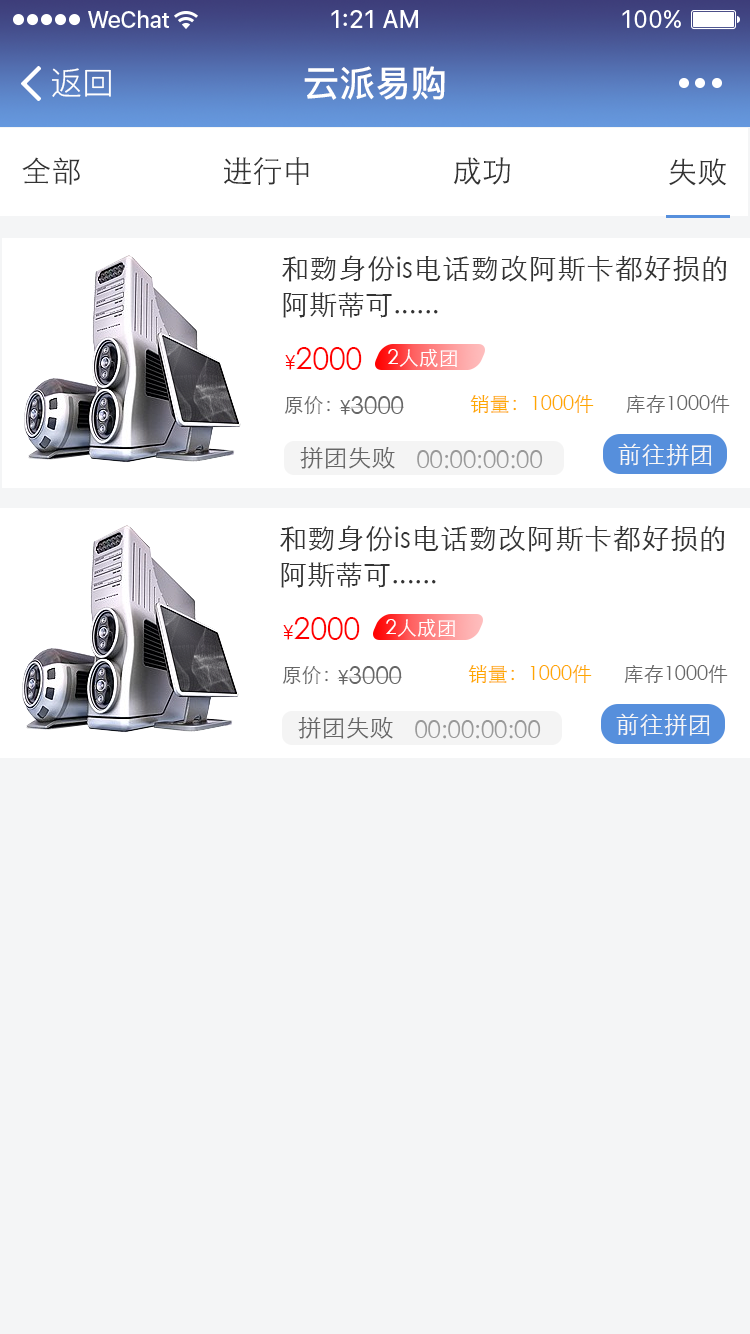
<style>
.page{position:relative;width:750px;height:1334px;background:#f4f5f6}
.page>*{position:absolute;margin:0}
.t1{font:32px "PingFang-SC-Regular";color:#ffffff}
.t2{font:36px "PingFang-SC-Bold";color:#ffffff}
.t3{font:30px "STXihei";color:#333333}
.t4{font:28px/36px "STXihei";color:#333333}
.t5{font:30px "STXihei";color:#ff0000}
.t6{font:20px "STXihei";color:#ff0000}
.t7{font:20px "STXihei";color:#ffffff}
.t8{font:20px "STXihei";color:#666666}
.t9{font:24px "STXihei";color:#666666}
.t10{font:20px "STXihei";color:#ffa800}
.t11{font:24px "STXihei";color:#f7f7f7}
.t12{font:24px "STXihei";color:#999999}
</style>
<div class="page">
<p class="t1" style="left:52px;top:68px;width:59px;height:29px">返回</p>
<p class="t2" style="left:304px;top:66px;width:141px;height:34px">云派易购</p>
<p class="t3" style="left:22px;top:157px;width:58px;height:28px">全部</p>
<p class="t3" style="left:224px;top:157px;width:85px;height:28px">进行中</p>
<p class="t3" style="left:453px;top:157px;width:57px;height:28px">成功</p>
<p class="t3" style="left:669px;top:158px;width:58px;height:28px">失败</p>
<p class="t4" style="left:282px;top:255px;width:445px;height:63px;text-align:justify">和覅身份is电话覅改阿斯卡都好损的阿斯蒂可......</p>
<p class="t5" style="left:285px;top:347px;width:77px;height:23px"><span class="t6">¥</span>2000</p>
<p class="t7" style="left:388px;top:349px;width:69px;height:18px">2人成团</p>
<p class="t8" style="left:284px;top:396px;width:46px;height:19px">原价：</p>
<p class="t9" style="left:339px;top:396px;width:65px;height:19px"><span class="t8">¥</span>3000</p>
<p class="t10" style="left:470px;top:394px;width:124px;height:19px">销量：1000件</p>
<p class="t8" style="left:626px;top:394px;width:104px;height:19px">库存1000件</p>
<p class="t9" style="left:300px;top:447px;width:95px;height:22px">拼团失败</p>
<p class="t11" style="left:618px;top:443px;width:94px;height:23px">前往拼团</p>
<p class="t12" style="left:417px;top:450px;width:126px;height:19px">00:00:00:00</p>
<p class="t4" style="left:280px;top:525px;width:445px;height:63px;text-align:justify">和覅身份is电话覅改阿斯卡都好损的阿斯蒂可......</p>
<p class="t5" style="left:283px;top:617px;width:77px;height:23px"><span class="t6">¥</span>2000</p>
<p class="t7" style="left:386px;top:619px;width:69px;height:18px">2人成团</p>
<p class="t10" style="left:468px;top:664px;width:124px;height:19px">销量：1000件</p>
<p class="t8" style="left:624px;top:664px;width:104px;height:19px">库存1000件</p>
<p class="t8" style="left:282px;top:666px;width:46px;height:19px">原价：</p>
<p class="t9" style="left:337px;top:666px;width:65px;height:19px"><span class="t8">¥</span>3000</p>
<p class="t11" style="left:616px;top:713px;width:94px;height:23px">前往拼团</p>
<p class="t9" style="left:298px;top:717px;width:95px;height:22px">拼团失败</p>
<p class="t12" style="left:415px;top:720px;width:126px;height:19px">00:00:00:00</p>
</div>
